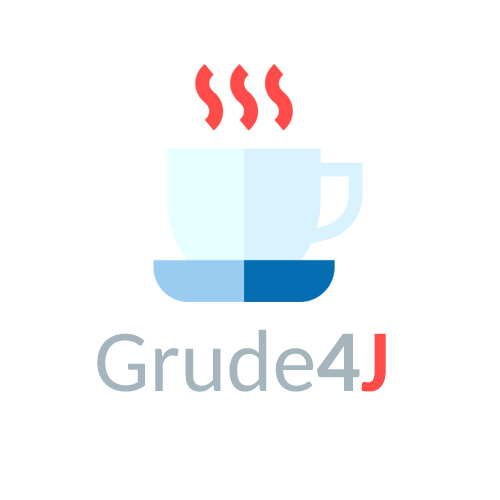
<style>
.page{position:relative;width:500px;height:500px;background:#ffffff}
.page>*{position:absolute;margin:0}
.t1{font:88.2px "Carlito";color:#a5b5bd}
.t2{font:88.2px "Carlito-Bold";color:#a5b5bd}
.t3{font:88.2px "Carlito-Bold";color:#ff4b4a}
</style>
<div class="page">
<p class="t1" style="left:97px;top:329px;width:289px;height:63px">Grude<span class="t2">4</span><span class="t3">J</span></p>
</div>
